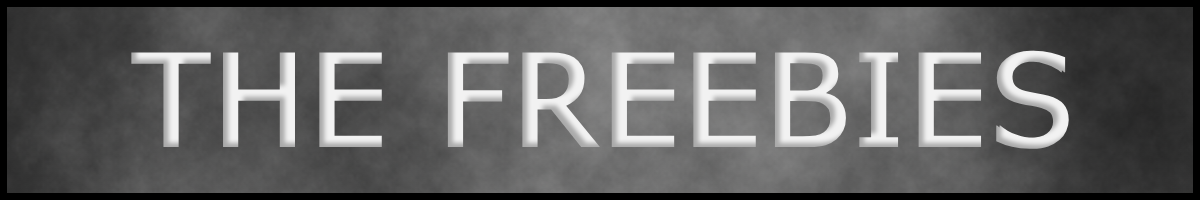
<style>
.page{position:relative;width:1200px;height:200px}
.page>*{position:absolute;margin:0}
.t1{font:130px "Verdana";color:#f2f2f2;font-weight:bold;scale:0.95 1}
</style>
<div class="page">
<p class="t1" style="left:131px;top:50px;width:938px;height:99px">THE FREEBIES</p>
</div>
